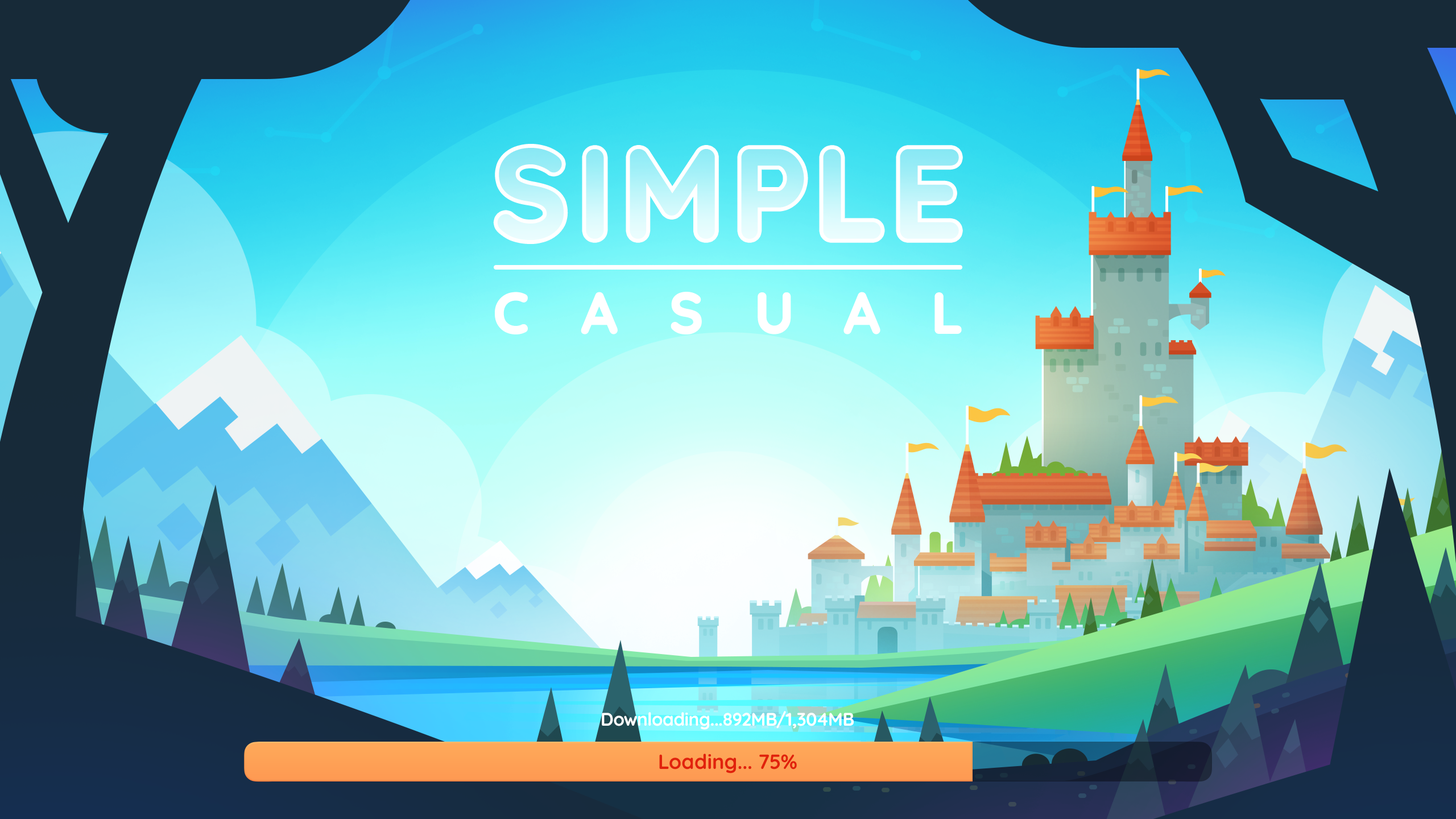
<style>
.page{position:relative;width:1456px;height:819px}
.page>*{position:absolute;margin:0}
.t1{font:125.1px "Quicksand-Bold";letter-spacing:0.07em;font-weight:bold}
.t2{font:56.9px "Quicksand-Bold";letter-spacing:0.9em;color:#ffffff;font-weight:bold}
.t3{font:18.2px "Quicksand-Bold";color:#ffffff}
.t4{font:20.5px "Quicksand-Bold";color:#e1220c}
</style>
<div class="page">
<p class="t1" style="left:497px;top:148px;width:462px;height:92px">SIMPLE</p>
<p class="t2" style="left:495px;top:292px;width:467px;height:42px">CASUAL</p>
<p class="t3" style="left:602px;top:711px;width:252px;height:19px">Downloading...892MB/1,304MB</p>
<p class="t4" style="left:659px;top:754px;width:138px;height:19px">Loading... 75%</p>
</div>
